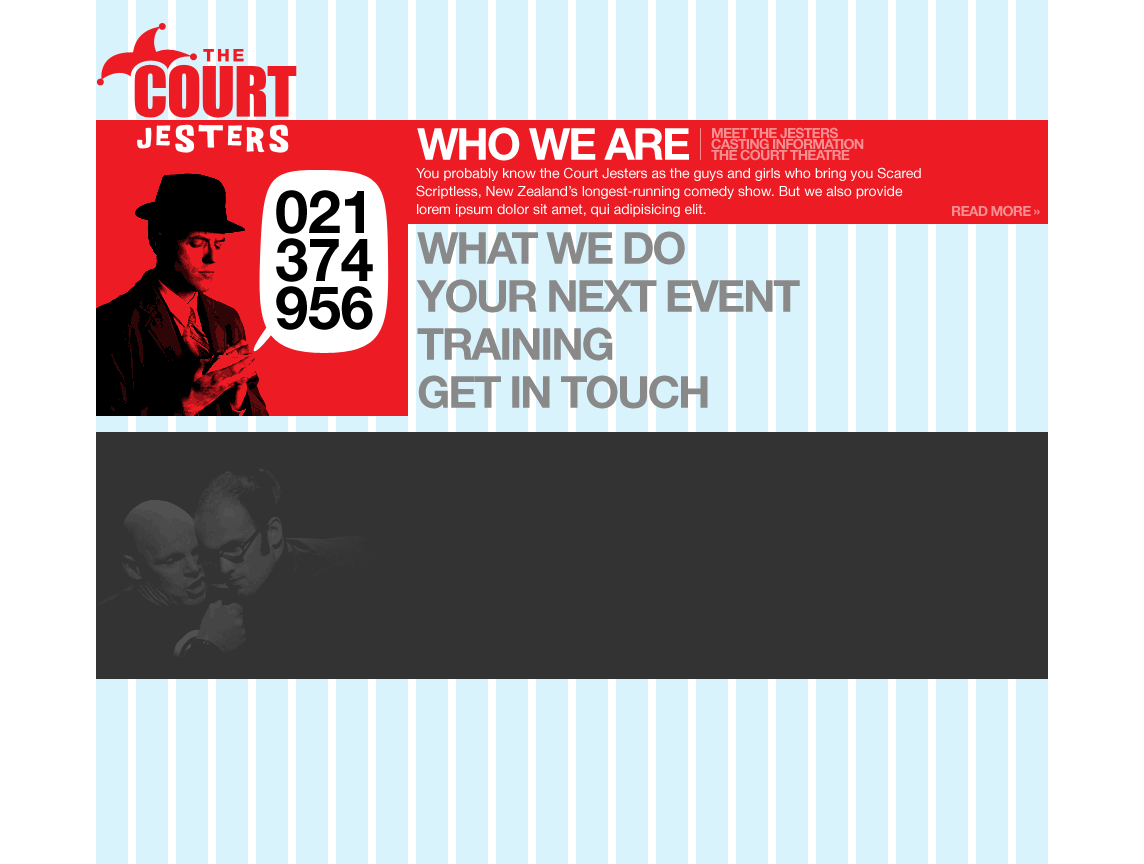
<style>
.page{position:relative;width:1144px;height:864px;background:#d9f3fd}
.page>*{position:absolute;margin:0}
.t1{font:44px "HelveticaNeueLTStd-Bd";letter-spacing:-0.05em;color:#ffffff;text-transform:uppercase}
.t2{font:14px/11px "HelveticaNeueLTStd-Bd";letter-spacing:-0.05em;color:#f68e92;text-transform:uppercase}
.t3{font:14px/18px "HelveticaNeueLTStd-Roman";color:#ffffff}
.t4{font:60px/48px "HelveticaNeueLTStd-Bd";letter-spacing:-0.01em;color:#010101;text-transform:uppercase}
.t5{font:14px "HelveticaNeueLTStd-Bd";letter-spacing:-0.05em;color:#f68e92;text-transform:uppercase}
.t6{font:44px "HelveticaNeueLTStd-Bd";letter-spacing:-0.05em;color:#898989;text-transform:uppercase}
</style>
<div class="page">
<p class="t1" style="left:417px;top:127px;width:272px;height:34px">Who we are</p>
<p class="t2" style="left:711px;top:127px;width:153px;height:34px">Meet the jesters<br>casting information<br>The Court Theatre</p>
<p class="t3" style="left:416px;top:167px;width:505px;height:50px">You probably know the Court Jesters as the guys and girls who bring you Scared Scriptless, New Zealand’s longest-running comedy show. But we also provide lorem ipsum dolor sit amet, qui adipisicing elit.</p>
<p class="t4" style="left:276px;top:190px;width:97px;height:140px">021<br>374<br>956</p>
<p class="t5" style="left:952px;top:205px;width:88px;height:12px">Read more »</p>
<p class="t6" style="left:417px;top:231px;width:268px;height:34px">What we do</p>
<p class="t6" style="left:416px;top:279px;width:384px;height:34px">Your next event</p>
<p class="t6" style="left:417px;top:327px;width:196px;height:34px">training</p>
<p class="t6" style="left:418px;top:375px;width:290px;height:34px">get in touch</p>
</div>
